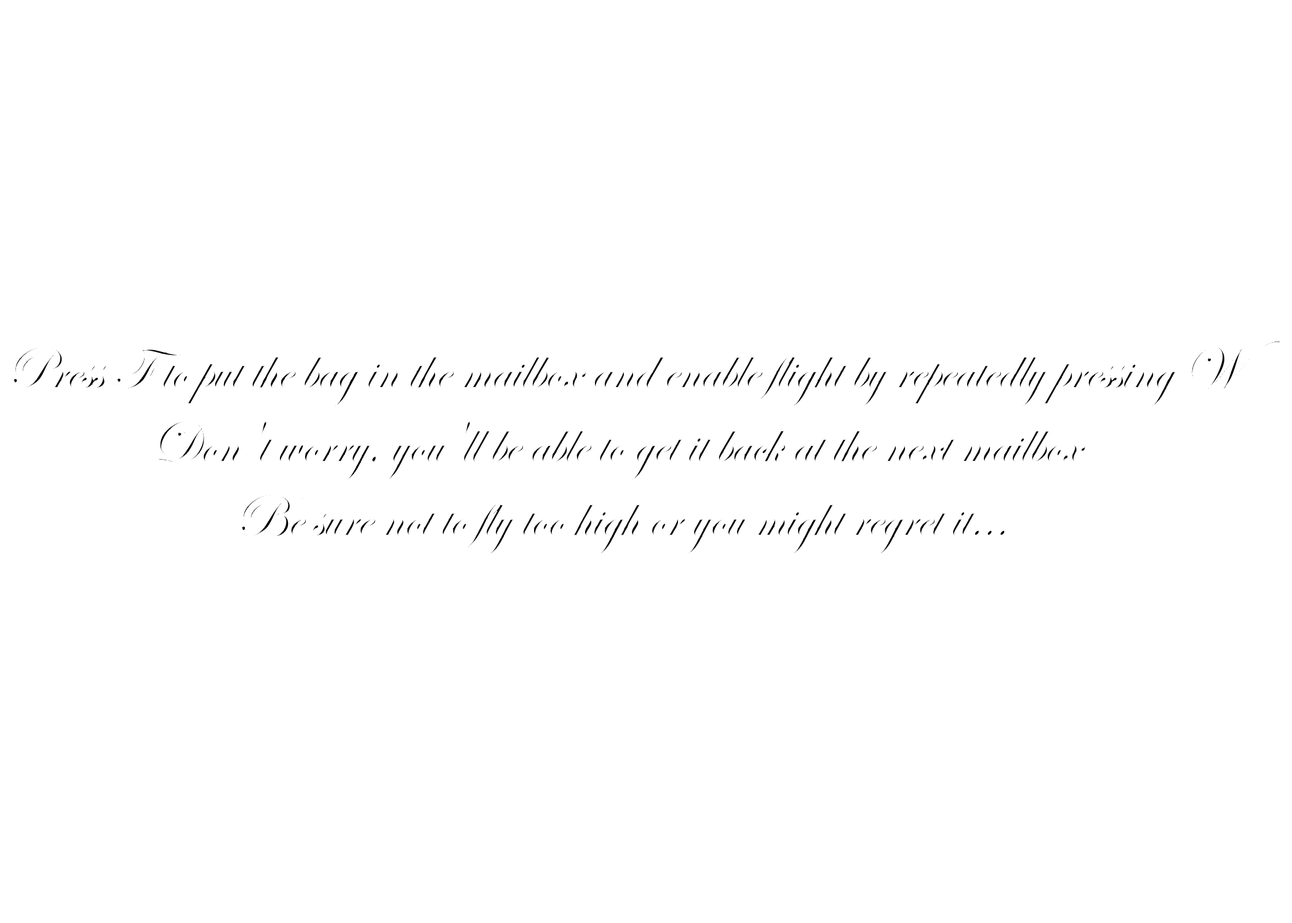
<style>
.page{position:relative;width:1292px;height:923px;background:#ffffff}
.page>*{position:absolute;margin:0}
.t1{font:61.5px "EdwardianScriptITC";scale:0.93 1}
</style>
<div class="page">
<p class="t1" style="left:12px;top:341px;width:1268px;height:215px;text-align:center">Press F to put the bag in the mailbox and enable flight by repeatedly pressing W<br>Don't worry, you'll be able to get it back at the next mailbox <br>Be sure not to fly too high or you might regret it...</p>
</div>
